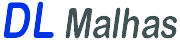
<style>
.page{position:relative;width:180px;height:46px;background:#ffffff}
.page>*{position:absolute;margin:0}
.t1{font:41.7px "ArialRoundedMTBold";color:#060808;font-style:italic;scale:0.8 1}
.t2{font:50px "ArialRoundedMTBold";color:#0033df;font-style:italic;scale:0.8 1}
</style>
<div class="page">
<p class="t1" style="left:3px;top:1px;width:174px;height:38px"><span class="t2">DL </span>Malhas</p>
</div>
